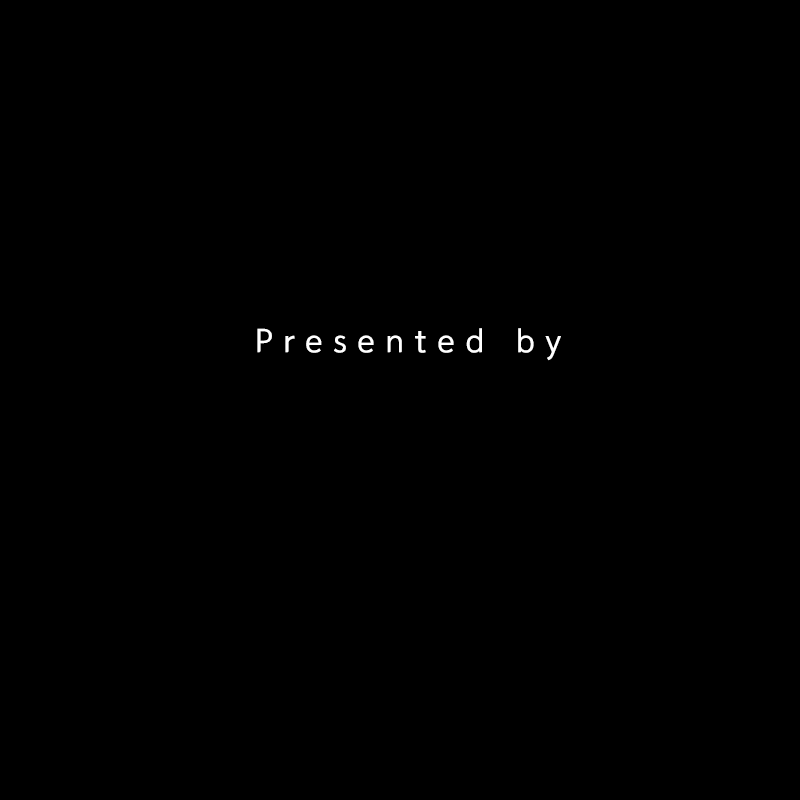
<style>
.page{position:relative;width:800px;height:800px;background:#000000}
.page>*{position:absolute;margin:0}
.t1{font:33.3px "BinggraeTaom";color:#ffffff}
</style>
<div class="page">
<p class="t1" style="left:257px;top:328px;width:304px;height:33px">P r e s e n t e d   b y</p>
</div>
